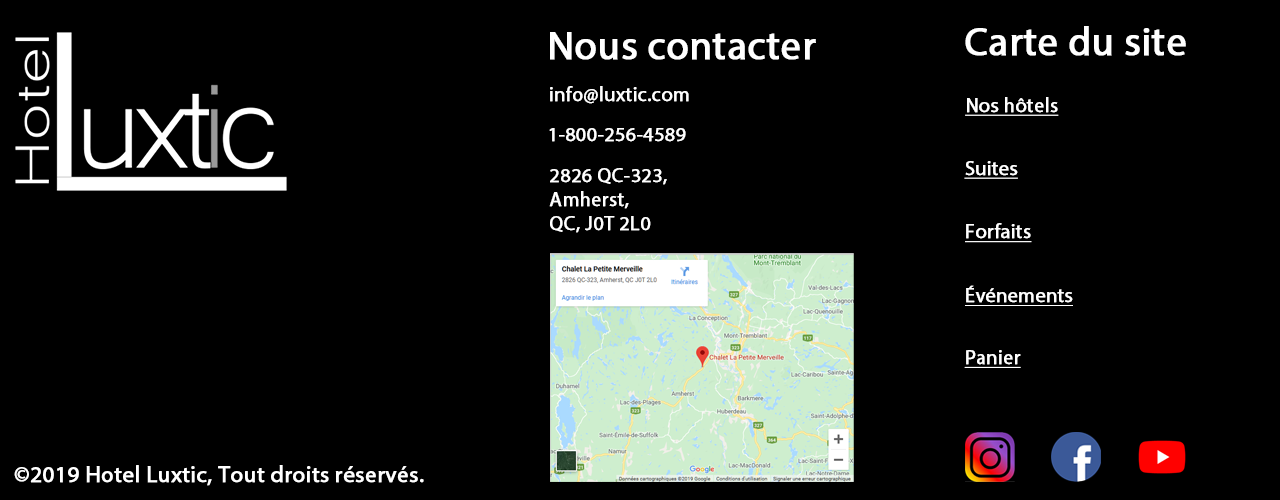
<style>
.page{position:relative;width:1280px;height:500px;background:#000000}
.page>*{position:absolute;margin:0}
.t1{font:40px "MyriadPro-Regular";color:#ffffff;font-weight:bold}
.t2{font:20px "MyriadPro-Regular";color:#ffffff;font-weight:bold}
.t3{font:20px "MyriadPro-Regular";color:#ffffff;font-weight:bold;text-decoration:underline}
.t4{font:23px "MyriadPro-Regular";color:#ffffff;font-weight:bold}
</style>
<div class="page">
<p class="t1" style="left:965px;top:26px;width:221px;height:30px">Carte du site</p>
<p class="t1" style="left:550px;top:32px;width:266px;height:28px">Nous contacter</p>
<p class="t2" style="left:550px;top:86px;width:139px;height:18px">info@luxtic.com</p>
<p class="t3" style="left:965px;top:97px;width:94px;height:19px">Nos hôtels</p>
<p class="t2" style="left:549px;top:128px;width:137px;height:14px">1-800-256-4589</p>
<p class="t3" style="left:964px;top:161px;width:54px;height:18px">Suites</p>
<p class="t2" style="left:549px;top:168px;width:118px;height:65px">2826 QC-323, <br>Amherst, <br>QC, J0T 2L0</p>
<p class="t3" style="left:965px;top:223px;width:67px;height:20px">Forfaits</p>
<p class="t3" style="left:965px;top:285px;width:108px;height:21px">Événements</p>
<p class="t3" style="left:964px;top:350px;width:57px;height:18px">Panier</p>
<p class="t4" style="left:14px;top:465px;width:410px;height:21px">©2019 Hotel Luxtic, Tout droits réservés.</p>
</div>
